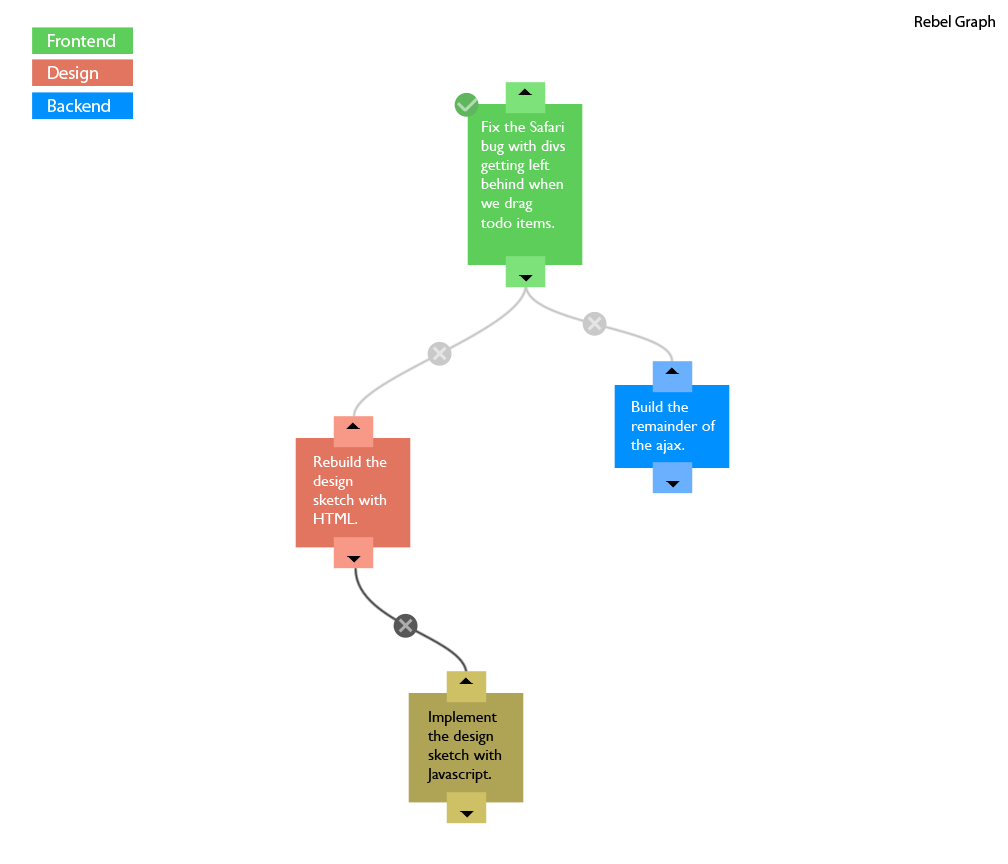
<style>
.page{position:relative;width:1008px;height:864px;background:#ffffff}
.page>*{position:absolute;margin:0}
.t1{font:16px "MyriadPro-Regular";color:#000000}
.t2{font:18px "MyriadPro-Regular";color:#ffffff}
.t3{font:16px "GillSans";color:#ffffff}
.t4{font:16px "GillSans";color:#000000}
</style>
<div class="page">
<p class="t1" style="left:915px;top:15px;width:80px;height:15px">Rebel Graph</p>
<p class="t2" style="left:48px;top:34px;width:67px;height:13px">Frontend</p>
<p class="t2" style="left:48px;top:66px;width:50px;height:17px">Design</p>
<p class="t2" style="left:48px;top:99px;width:62px;height:13px">Backend</p>
<p class="t3" style="left:480px;top:121px;width:85px;height:107px">Fix the Safari bug with divs getting left behind when we drag todo items.</p>
<p class="t3" style="left:631px;top:401px;width:85px;height:53px">Build the remainder of the ajax.</p>
<p class="t3" style="left:313px;top:456px;width:74px;height:68px">Rebuild the design sketch with HTML.</p>
<p class="t4" style="left:427px;top:711px;width:75px;height:72px">Implement the design sketch with Javascript.</p>
</div>
